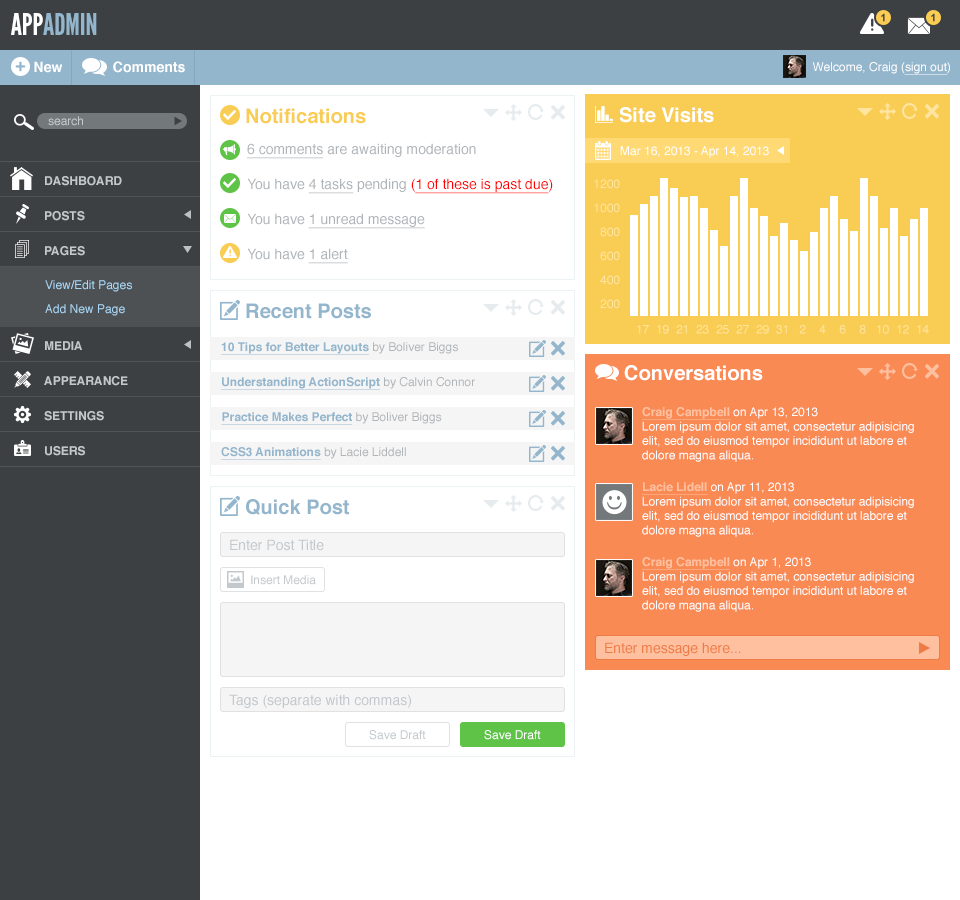
<style>
.page{position:relative;width:960px;height:900px;background:#ffffff}
.page>*{position:absolute;margin:0}
.t1{font:30px "LeagueGothic";color:#93b6cd}
.t2{font:30px "LeagueGothic";color:#ffffff}
.t3{font:14px "Helvetica-Bold";color:#ffffff}
.t4{font:12px "Helvetica";color:#ffffff}
.t5{font:12px "Helvetica";color:#ffffff;text-decoration:underline}
.t6{font:20px "Helvetica-Bold";color:#f9cc54}
.t7{font:20px "Helvetica-Bold";color:#ffffff}
.t8{font:12px "Helvetica";color:#c2c8cc}
.t9{font:14px/35px "Helvetica";color:#b0b5b9}
.t10{font:14px/35px "Helvetica";color:#b0b5b9;text-decoration:underline}
.t11{font:14px/35px "Helvetica";color:#ff0101}
.t12{font:14px/35px "Helvetica";color:#ff0101;text-decoration:underline}
.t13{font:12px "Helvetica-Bold";color:#c2c8cc}
.t14{font:12px/24px "Helvetica";color:#ffe59f}
.t15{font:12px/24px "Helvetica";color:#a9d7f6}
.t16{font:20px "Helvetica-Bold";color:#93b6cd}
.t17{font:12px "Helvetica";color:#ffe59f}
.t18{font:12px "Helvetica-Bold";color:#93b6cd;text-decoration:underline}
.t19{font:12px/35px "Helvetica";color:#b0b5b9}
.t20{font:12px "Helvetica-Bold";color:#ffc0a0;text-decoration:underline}
.t21{font:14px "Helvetica";color:#c2c8cc}
.t22{font:14px "Helvetica";color:#ed7c46}
</style>
<div class="page">
<p class="t1" style="left:11px;top:13px;width:86px;height:22px"><span class="t2">APP</span>ADMIN</p>
<p class="t3" style="left:34px;top:61px;width:29px;height:12px">New</p>
<p class="t3" style="left:113px;top:61px;width:72px;height:12px">Comments</p>
<p class="t4" style="left:813px;top:62px;width:137px;height:13px">Welcome, Craig (<span class="t5">sign out</span>)</p>
<p class="t6" style="left:246px;top:108px;width:120px;height:16px">Notifications</p>
<p class="t7" style="left:619px;top:107px;width:95px;height:16px">Site Visits</p>
<p class="t8" style="left:48px;top:116px;width:35px;height:10px">search</p>
<p class="t9" style="left:247px;top:143px;width:306px;height:121px"><span class="t10">6 comments </span>are awaiting moderation<br>You have <span class="t10">4 tasks </span>pending <span class="t11">(</span><span class="t12">1 of these is past due</span><span class="t11">)<br></span>You have <span class="t10">1 unread message<br></span>You have <span class="t10">1 alert</span></p>
<p class="t4" style="left:620px;top:146px;width:149px;height:12px">Mar 16, 2013 - Apr 14, 2013</p>
<p class="t13" style="left:45px;top:176px;width:77px;height:10px">DASHBOARD</p>
<p class="t14" style="left:594px;top:179px;width:26px;height:130px;text-align:right">1200<br>1000<br>800<br>600<br>400<br>200</p>
<p class="t13" style="left:45px;top:211px;width:40px;height:10px">POSTS</p>
<p class="t13" style="left:45px;top:246px;width:40px;height:10px">PAGES</p>
<p class="t15" style="left:45px;top:280px;width:87px;height:36px">View/Edit Pages<br>Add New Page</p>
<p class="t16" style="left:246px;top:303px;width:125px;height:16px">Recent Posts</p>
<p class="t17" style="left:637px;top:325px;width:12px;height:9px">17</p>
<p class="t17" style="left:657px;top:325px;width:12px;height:9px">19</p>
<p class="t17" style="left:676px;top:325px;width:11px;height:9px">21</p>
<p class="t17" style="left:696px;top:325px;width:13px;height:9px">23</p>
<p class="t17" style="left:716px;top:325px;width:13px;height:9px">25</p>
<p class="t17" style="left:736px;top:325px;width:13px;height:9px">27</p>
<p class="t17" style="left:756px;top:325px;width:13px;height:9px">29</p>
<p class="t17" style="left:776px;top:325px;width:11px;height:9px">31</p>
<p class="t17" style="left:799px;top:325px;width:7px;height:9px">2</p>
<p class="t17" style="left:819px;top:325px;width:7px;height:9px">4</p>
<p class="t17" style="left:839px;top:325px;width:7px;height:9px">6</p>
<p class="t17" style="left:859px;top:325px;width:7px;height:9px">8</p>
<p class="t17" style="left:877px;top:325px;width:12px;height:9px">10</p>
<p class="t17" style="left:897px;top:325px;width:12px;height:9px">12</p>
<p class="t17" style="left:917px;top:325px;width:12px;height:9px">14</p>
<p class="t13" style="left:45px;top:341px;width:37px;height:9px">MEDIA</p>
<p class="t18" style="left:221px;top:342px;width:254px;height:118px">10 Tips for Better Layouts <span class="t19">by Boliver Biggs<br></span>Understanding ActionScript <span class="t19">by Calvin Connor<br></span>Practice Makes Perfect <span class="t19">by Boliver Biggs<br></span>CSS3 Animations <span class="t19">by Lacie Liddell</span></p>
<p class="t7" style="left:624px;top:365px;width:139px;height:16px">Conversations</p>
<p class="t13" style="left:44px;top:376px;width:84px;height:10px">APPEARANCE</p>
<p class="t13" style="left:44px;top:411px;width:60px;height:10px">SETTINGS</p>
<p class="t4" style="left:642px;top:407px;width:272px;height:55px"><span class="t20">Craig Campbell</span> on Apr 13, 2013<br>Lorem ipsum dolor sit amet, consectetur adipisicing<br>elit, sed do eiusmod tempor incididunt ut labore et<br>dolore magna aliqua.</p>
<p class="t13" style="left:45px;top:446px;width:40px;height:10px">USERS</p>
<p class="t4" style="left:642px;top:482px;width:272px;height:55px"><span class="t20">Lacie Lidell</span> on Apr 11, 2013<br>Lorem ipsum dolor sit amet, consectetur adipisicing<br>elit, sed do eiusmod tempor incididunt ut labore et<br>dolore magna aliqua.</p>
<p class="t16" style="left:246px;top:499px;width:103px;height:16px">Quick Post</p>
<p class="t21" style="left:230px;top:539px;width:94px;height:12px">Enter Post Title</p>
<p class="t4" style="left:642px;top:557px;width:272px;height:55px"><span class="t20">Craig Campbell</span> on Apr 1, 2013<br>Lorem ipsum dolor sit amet, consectetur adipisicing<br>elit, sed do eiusmod tempor incididunt ut labore et<br>dolore magna aliqua.</p>
<p class="t8" style="left:251px;top:575px;width:65px;height:10px">Insert Media</p>
<p class="t22" style="left:605px;top:642px;width:136px;height:14px">Enter message here...</p>
<p class="t21" style="left:229px;top:694px;width:182px;height:14px">Tags (separate with commas)</p>
<p class="t8" style="left:369px;top:730px;width:57px;height:10px">Save Draft</p>
<p class="t4" style="left:484px;top:730px;width:57px;height:10px">Save Draft</p>
</div>
